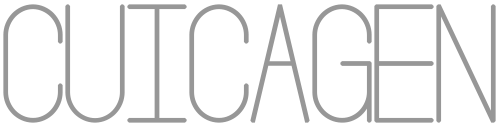
<style>
.page{position:relative;width:500px;height:125px;background:#ffffff}
.page>*{position:absolute;margin:0}
.t1{font:144.2px "OsloII";letter-spacing:0.005em;color:#979797;font-weight:bold;scale:0.97 1}
</style>
<div class="page">
<p class="t1" style="left:3px;top:4px;width:493px;height:119px">CuicaGen</p>
</div>
